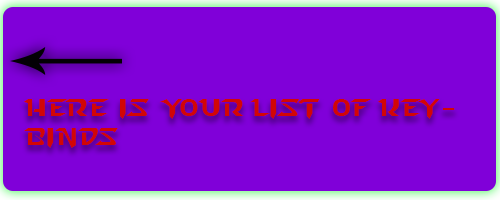
<style>
.page{position:relative;width:500px;height:200px;background:#8000d9}
.page>*{position:absolute;margin:0}
.t1{font:24px "StarcraftNormal";color:#d20606}
</style>
<div class="page">
<p class="t1" style="left:24px;top:99px;width:431px;height:49px">Here is your list of keybinds</p>
</div>
